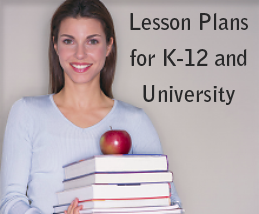
<style>
.page{position:relative;width:259px;height:214px}
.page>*{position:absolute;margin:0}
.t1{font:22px/36px "BellGothicStd-Bold";color:#282829}
</style>
<div class="page">
<p class="t1" style="left:130px;top:13px;width:118px;height:92px;text-align:center">Lesson Plans<br>for K-12 and<br>University</p>
</div>
